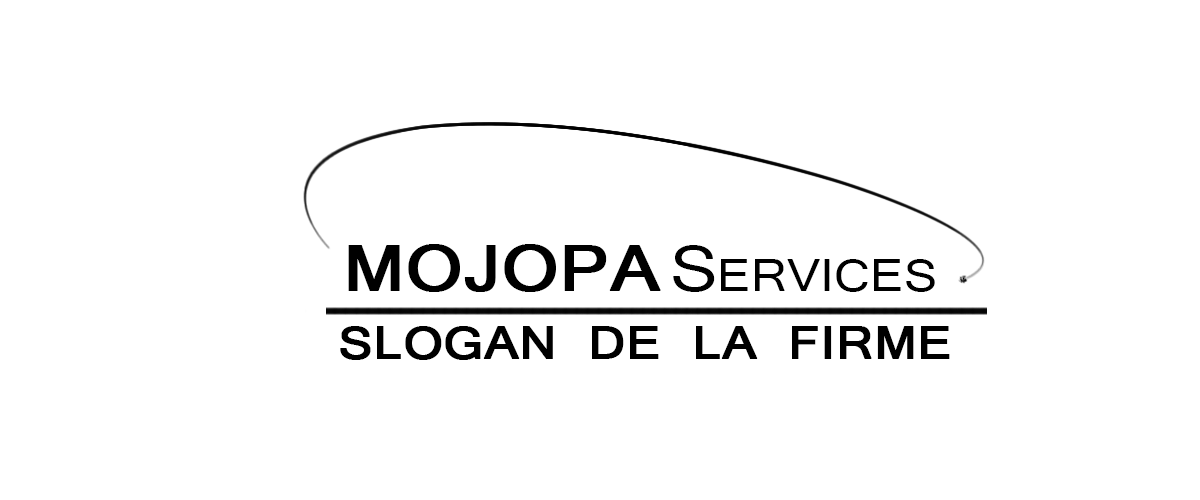
<style>
.page{position:relative;width:1200px;height:500px;background:#ffffff}
.page>*{position:absolute;margin:0}
.t1{font:83.3px "Tunga";color:#000000;font-weight:bold;scale:1.1 1}
.t2{font:83.3px "Tunga";color:#000000;font-variant:small-caps;scale:1.1 1}
.t3{font:83.3px "Tunga";color:#000000;font-variant:small-caps;font-weight:bold;scale:1.1 1}
</style>
<div class="page">
<p class="t1" style="left:348px;top:244px;width:313px;height:48px">MOJOPA</p>
<p class="t2" style="left:673px;top:245px;width:262px;height:47px">Services</p>
<p class="t3" style="left:340px;top:326px;width:610px;height:34px">slogan de la firme</p>
</div>
